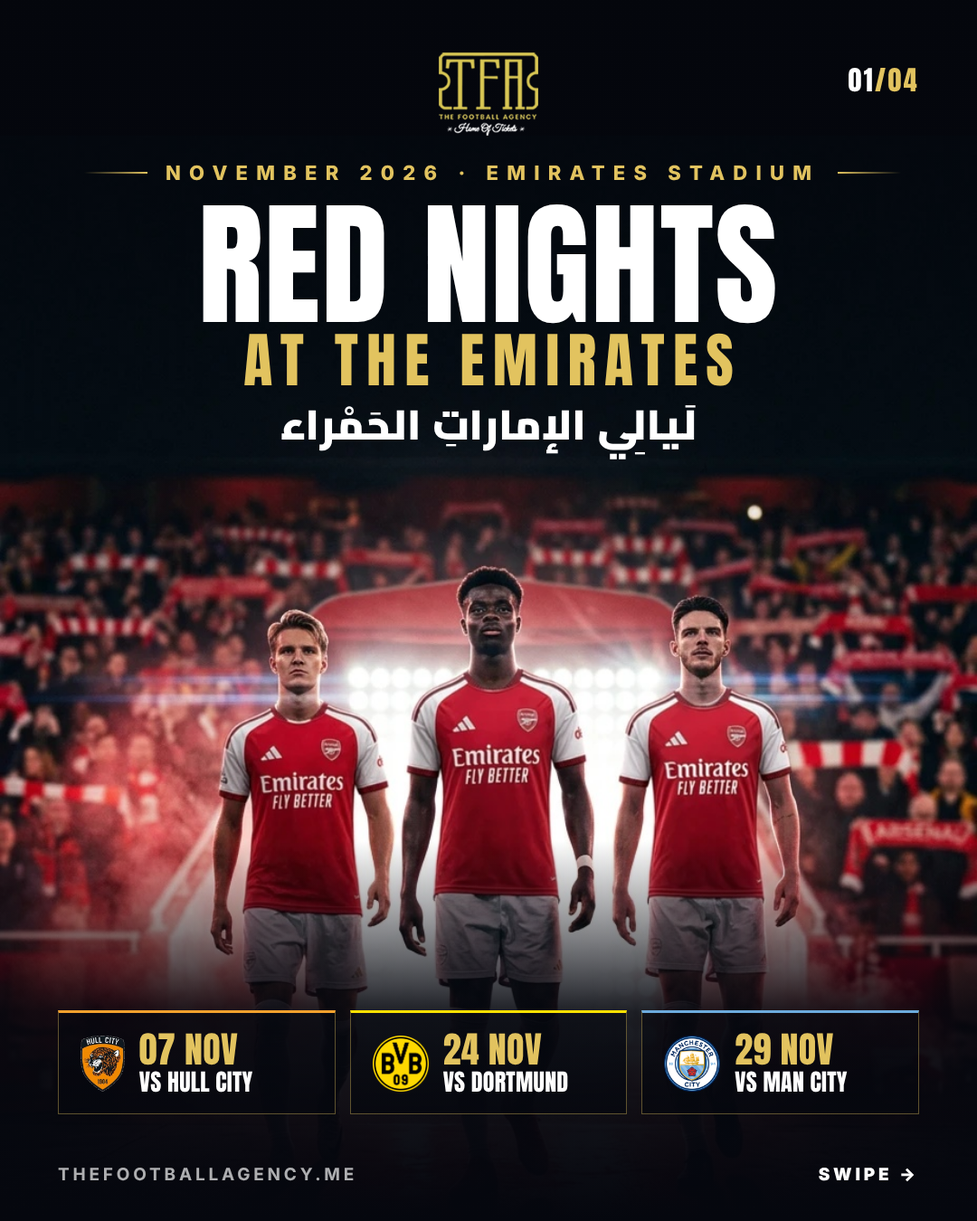
<style>
.page{position:relative;width:977px;height:1221px}
.page>*{position:absolute;margin:0}
.t1{font:27.1px "Anton-Regular";letter-spacing:0.08em;color:#e2c35f}
.t2{font:27.1px "Anton-Regular";letter-spacing:0.08em;color:#ffffff}
.t3{font:19.9px "Inter-ExtraBold";letter-spacing:0.42em;color:#e2c35f}
.t4{font:135.7px "Anton-Regular";letter-spacing:0.01em;color:#ffffff}
.t5{font:59.7px "Anton-Regular";letter-spacing:0.14em;color:#e2c35f}
.t6{font:41.6px "Cairo-Black";color:#ffffff}
.t7{font:36.2px "Anton-Regular";letter-spacing:0.01em;color:#e2c35f}
.t8{font:23.5px "Anton-Regular";letter-spacing:0.01em;color:#ffffff}
.t9{font:17.2px "Inter-Bold";letter-spacing:0.2em}
.t10{font:17.2px "Inter-ExtraBold";letter-spacing:0.2em;color:#ffffff}
</style>
<div class="page">
<p class="t1" style="left:848px;top:68px;width:69px;height:24px"><span class="t2">01</span>/04</p>
<p class="t3" style="left:166px;top:165px;width:644px;height:16px">NOVEMBER 2026 · EMIRATES STADIUM</p>
<p class="t4" style="left:203px;top:204px;width:572px;height:120px">RED NIGHTS</p>
<p class="t5" style="left:244px;top:333px;width:489px;height:53px">AT THE EMIRATES</p>
<p class="t6" style="left:281px;top:405px;width:414px;height:54px">لَيالِي الإماراتِ الحَمْراء</p>
<p class="t7" style="left:139px;top:1033px;width:99px;height:32px">07 NOV</p>
<p class="t7" style="left:443px;top:1033px;width:99px;height:32px">24 NOV</p>
<p class="t7" style="left:735px;top:1033px;width:98px;height:32px">29 NOV</p>
<p class="t8" style="left:139px;top:1071px;width:113px;height:21px">VS HULL CITY</p>
<p class="t8" style="left:443px;top:1071px;width:125px;height:21px">VS DORTMUND</p>
<p class="t8" style="left:734px;top:1071px;width:113px;height:21px">VS MAN CITY</p>
<p class="t9" style="left:58px;top:1168px;width:296px;height:13px">THEFOOTBALLAGENCY.ME</p>
<p class="t10" style="left:818px;top:1168px;width:96px;height:14px">SWIPE →</p>
</div>
